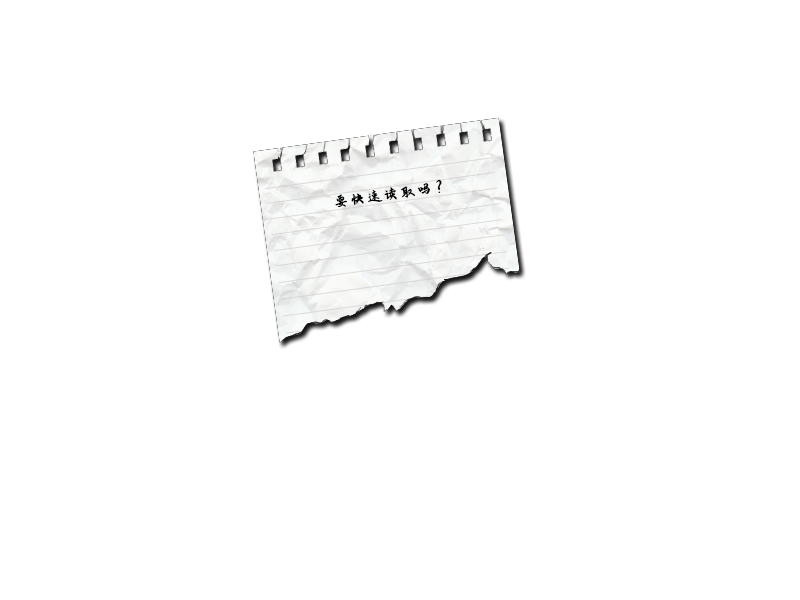
<style>
.page{position:relative;width:800px;height:600px;background:#ffffff}
.page>*{position:absolute;margin:0}
.t1{font:18.8px "slideyouran-Regular";color:#000000}
</style>
<div class="page">
<p class="t1" style="left:335px;top:179px;width:107px;height:28px;rotate:-8deg">要快速读取吗?</p>
</div>
